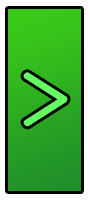
<style>
.page{position:relative;width:90px;height:200px}
.page>*{position:absolute;margin:0}
.t1{font:83.3px "wearealien!!";color:#65ff65}
</style>
<div class="page">
<p class="t1" style="left:23px;top:72px;width:45px;height:55px">&gt;</p>
</div>
